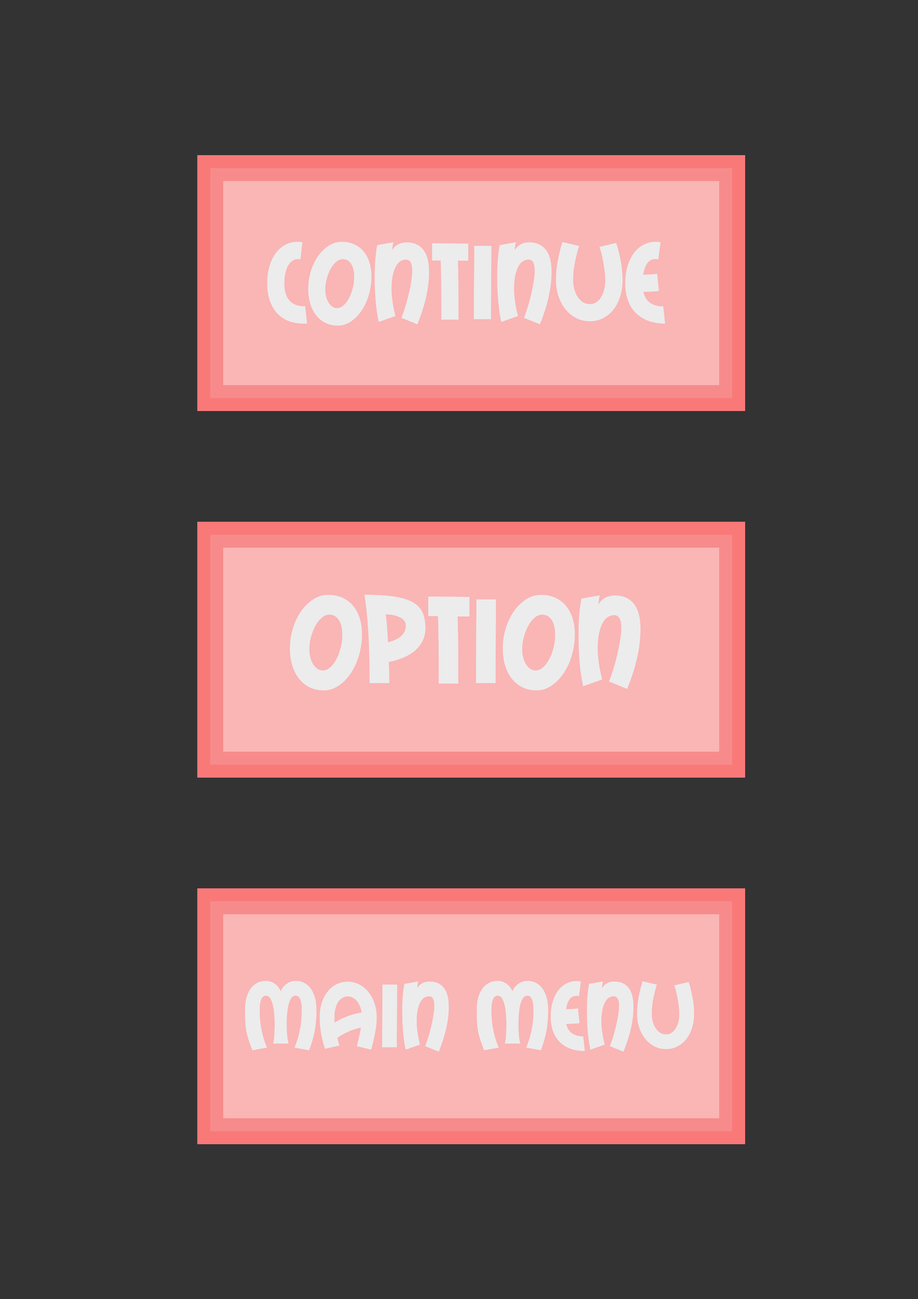
<style>
.page{position:relative;width:918px;height:1299px;background:#333333}
.page>*{position:absolute;margin:0}
.t1{font:108px "MailRayStuff-Regular";color:#ececec}
.t2{font:123.4px "MailRayStuff-Regular";color:#ececec}
.t3{font:92.6px "MailRayStuff-Regular";color:#ececec}
</style>
<div class="page">
<p class="t1" style="left:267px;top:242px;width:398px;height:84px">Continue</p>
<p class="t2" style="left:290px;top:595px;width:351px;height:95px">Option</p>
<p class="t3" style="left:245px;top:981px;width:449px;height:70px">Main Menu</p>
</div>
